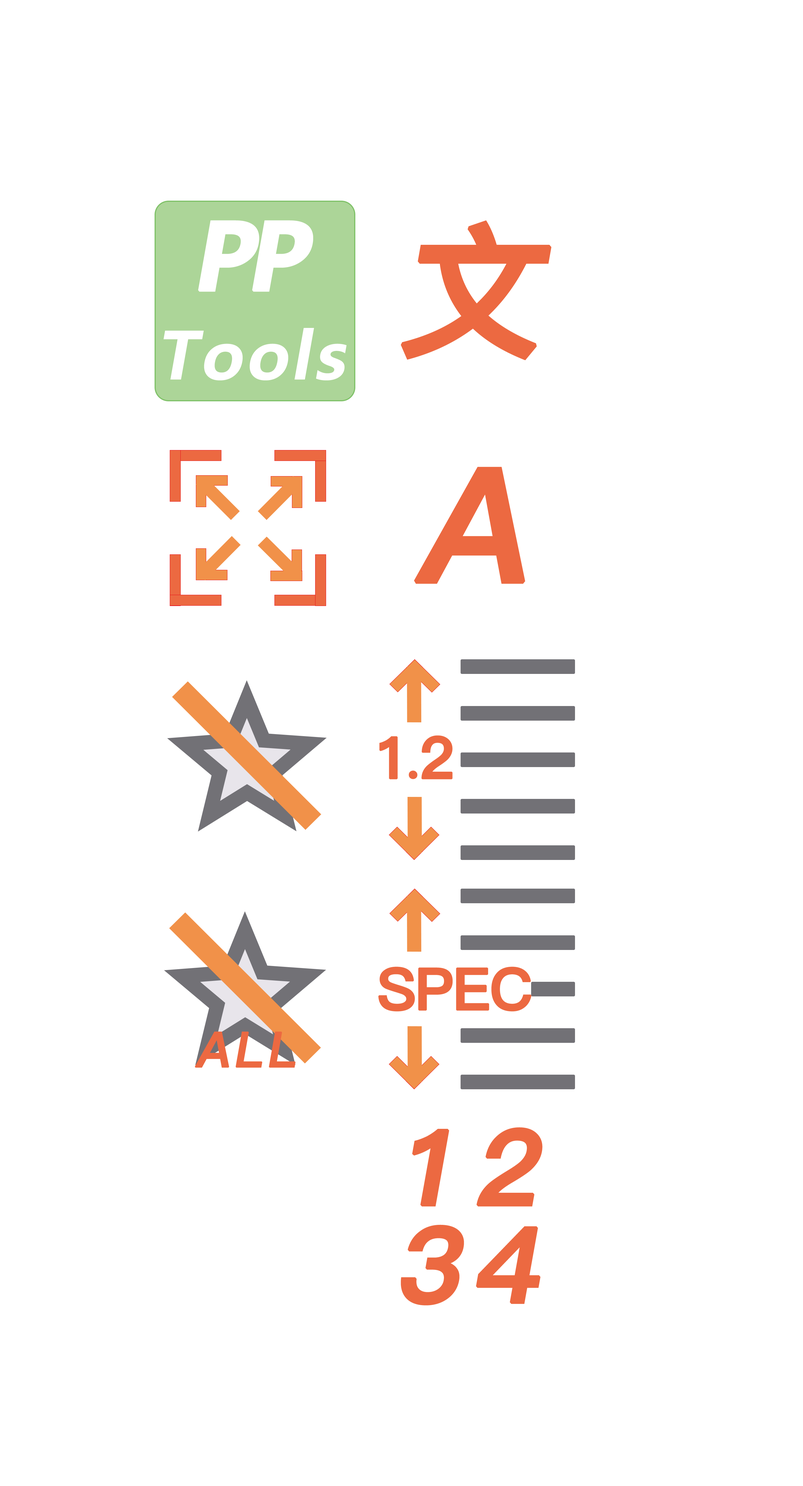
<style>
.page{position:relative;width:803px;height:1486px;background:#ffffff}
.page>*{position:absolute;margin:0}
.t1{font:64.5px/17.8px "MicrosoftYaHeiUI-Bold";letter-spacing:0.044em;color:#ffffff;font-style:italic}
.t2{font:90.8px/17.8px "MicrosoftYaHeiUI-Bold";letter-spacing:-0.096em;color:#ffffff;font-weight:bold;font-style:italic}
.t3{font:143.3px "PingFang-SC-Heavy";letter-spacing:-0.096em;color:#ec6941;font-weight:bold;font-style:italic}
.t4{font:157.6px "PingFang-SC-Heavy";letter-spacing:-0.096em;color:#ec6941;font-weight:bold;font-style:italic}
.t5{font:57.9px "PingFang-SC-Heavy";letter-spacing:-0.096em;color:#ec6941;font-weight:bold}
.t6{font:57.9px "NSimSun";letter-spacing:-0.296em;color:#ec6941;font-weight:bold}
.t7{font:57.9px "PingFang-SC-Heavy";letter-spacing:-0.04em;color:#ec6941;font-weight:bold}
.t8{font:48.5px "PingFang-SC-Heavy";letter-spacing:0.064em;color:#ec6941;font-weight:bold;font-style:italic}
.t9{font:104.6px/97.5px "PingFang-SC-Heavy";letter-spacing:0.11em;color:#ec6941;font-weight:bold;font-style:italic}
</style>
<div class="page">
<p class="t1" style="left:163px;top:220px;width:184px;height:160px;text-align:center"><span class="t2">PP<br><br><br><br><br></span>Tools</p>
<p class="t3" style="left:400px;top:220px;width:151px;height:140px">文</p>
<p class="t4" style="left:414px;top:467px;width:111px;height:117px">A</p>
<p class="t5" style="left:379px;top:735px;width:73px;height:44px">1<span class="t6">.</span>2</p>
<p class="t7" style="left:378px;top:966px;width:153px;height:45px">SPEC</p>
<p class="t8" style="left:195px;top:1031px;width:101px;height:37px">ALL</p>
<p class="t9" style="left:400px;top:1127px;width:142px;height:178px;text-align:center">12<br>34</p>
</div>
